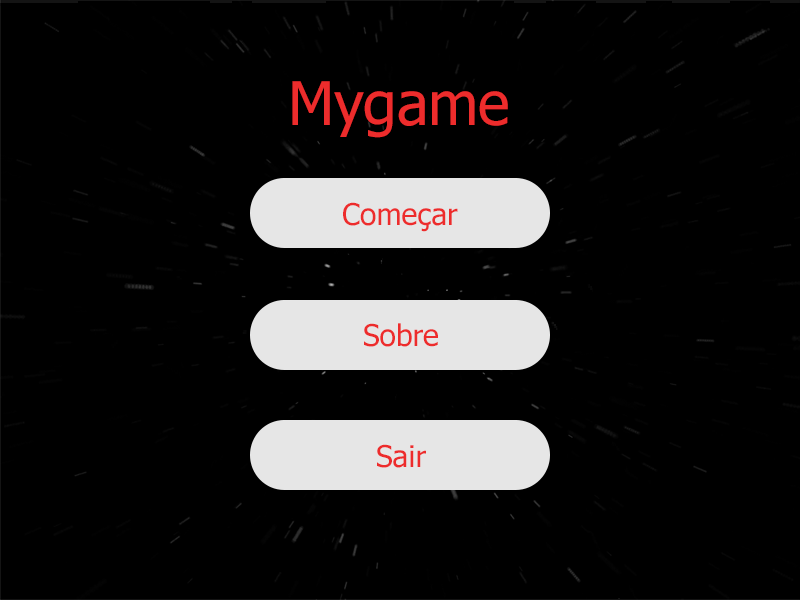
<style>
.page{position:relative;width:800px;height:600px;background:#000000}
.page>*{position:absolute;margin:0}
.t1{font:60px "Tahoma";color:#ed2c2c}
.t2{font:30px "Tahoma";color:#ed2c2c}
</style>
<div class="page">
<p class="t1" style="left:292px;top:81px;width:216px;height:57px">Mygame</p>
<p class="t2" style="left:343px;top:202px;width:115px;height:30px">Começar</p>
<p class="t2" style="left:364px;top:323px;width:74px;height:24px">Sobre</p>
<p class="t2" style="left:377px;top:444px;width:49px;height:24px">Sair</p>
</div>
